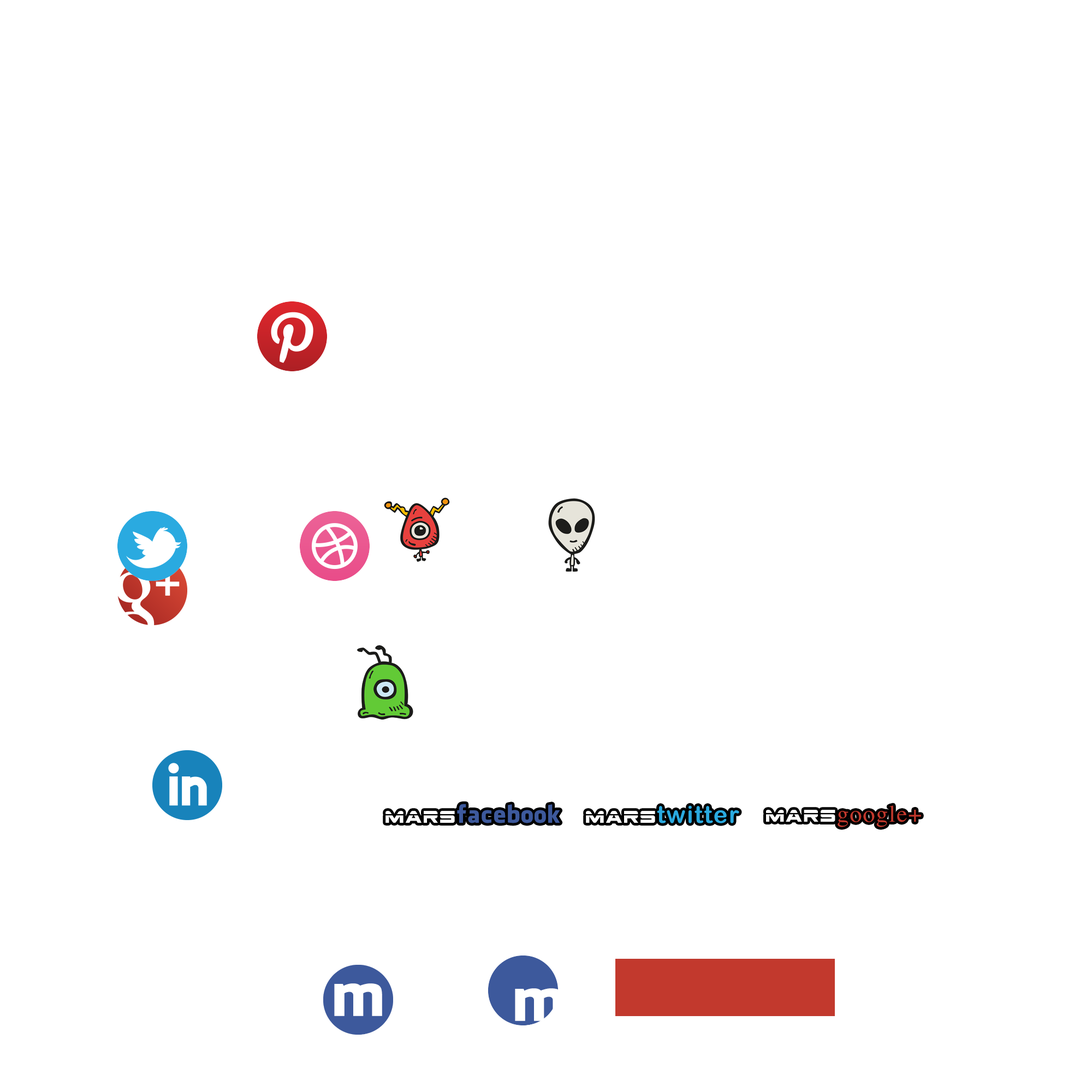
<style>
.page{position:relative;width:1092px;height:1092px;background:#ffffff}
.page>*{position:absolute;margin:0}
.t1{font:40.5px "FacebookLetterFaces";letter-spacing:0.05em;color:#3d599c}
.t2{font:40.5px "SpaceRangerLaser";letter-spacing:0.05em;color:#ffffff}
.t3{font:40.5px "ArialRoundedMTBold";letter-spacing:0.05em;color:#2aaae0}
.t4{font:40.5px "Times-Roman";letter-spacing:0.05em;color:#c2392d}
.t5{font:59.8px "FacebookLetterFaces";letter-spacing:0.05em;color:#ffffff}
</style>
<div class="page">
<p class="t1" style="left:385px;top:804px;width:175px;height:19px"><span class="t2">mars</span>facebook</p>
<p class="t3" style="left:586px;top:805px;width:153px;height:18px"><span class="t2">mars</span>twitter</p>
<p class="t4" style="left:766px;top:805px;width:155px;height:22px"><span class="t2">mars</span>google+</p>
<p class="t5" style="left:334px;top:983px;width:48px;height:33px">m</p>
</div>
